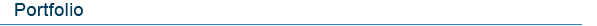
<style>
.page{position:relative;width:597px;height:26px;background:#ffffff}
.page>*{position:absolute;margin:0}
.t1{font:18px "ArialMT";letter-spacing:0.025em;color:#003a5a}
</style>
<div class="page">
<p class="t1" style="left:15px;top:3px;width:68px;height:13px">Portfolio</p>
</div>
